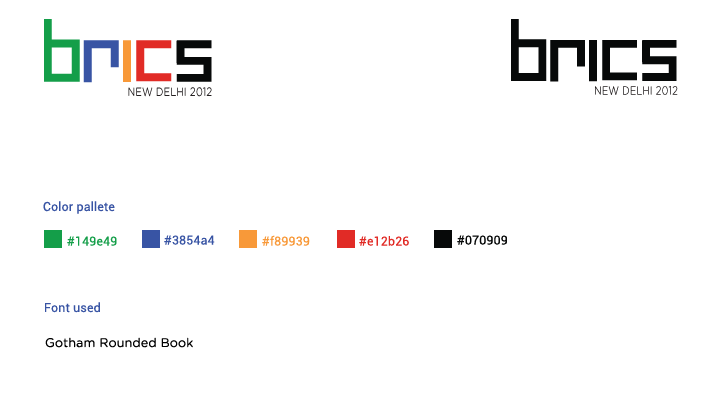
<style>
.page{position:relative;width:720px;height:400px;background:#ffffff}
.page>*{position:absolute;margin:0}
.t1{font:12.5px "Roboto-Regular";letter-spacing:0.01em;color:#3854a4}
.t2{font:12.5px "Roboto-Regular";letter-spacing:0.01em;color:#149e49}
.t3{font:12.5px "Roboto-Regular";letter-spacing:0.01em;color:#f89939}
.t4{font:12.5px "Roboto-Regular";letter-spacing:0.01em;color:#e12b26}
.t5{font:12.5px "Roboto-Regular";letter-spacing:0.01em;color:#070909}
.t6{font:12.5px "GothamRounded-Book";letter-spacing:0.01em;color:#000000}
</style>
<div class="page">
<p class="t1" style="left:43px;top:201px;width:72px;height:13px">Color pallete</p>
<p class="t2" style="left:67px;top:236px;width:50px;height:10px">#149e49</p>
<p class="t1" style="left:164px;top:235px;width:51px;height:10px">#3854a4</p>
<p class="t3" style="left:262px;top:235px;width:48px;height:11px">#f89939</p>
<p class="t4" style="left:359px;top:236px;width:50px;height:10px">#e12b26</p>
<p class="t5" style="left:457px;top:235px;width:50px;height:10px">#070909</p>
<p class="t1" style="left:45px;top:302px;width:55px;height:11px">Font used</p>
<p class="t6" style="left:45px;top:337px;width:148px;height:11px">Gotham Rounded Book</p>
</div>
